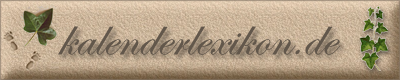
<style>
.page{position:relative;width:400px;height:80px}
.page>*{position:absolute;margin:0}
.t1{font:55px "EdwardianScriptITC";color:#62574b}
</style>
<div class="page">
<p class="t1" style="left:58px;top:26px;width:283px;height:29px">kalenderlexikon.de</p>
</div>
